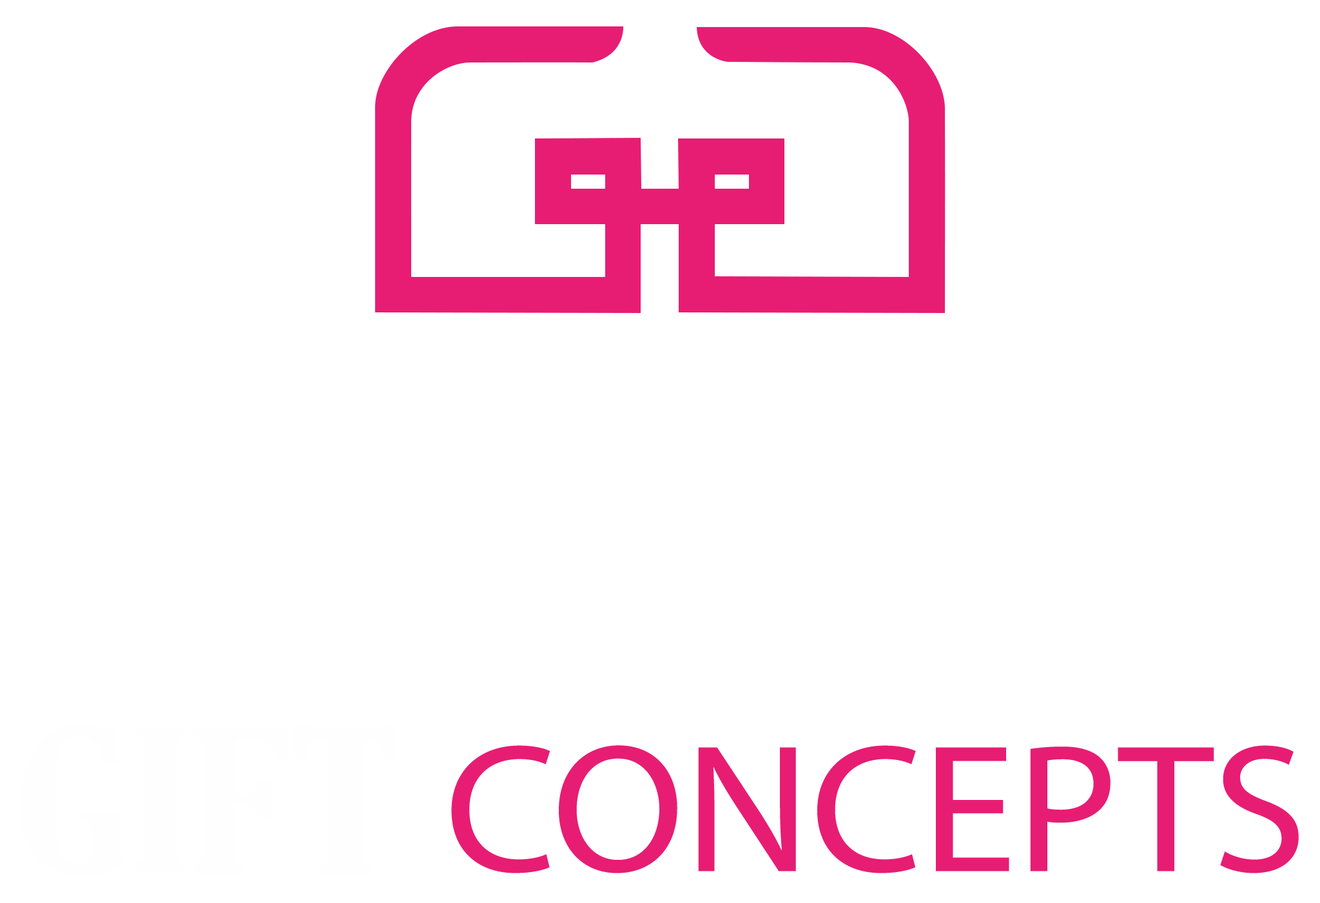
<style>
.page{position:relative;width:1320px;height:903px;background:#ffffff}
.page>*{position:absolute;margin:0}
.t1{font:183.2px "MyriadPro-Regular";color:#e71d73;scale:1.05 1}
</style>
<div class="page">
<p class="t1" style="left:451px;top:746px;width:848px;height:128px">CONCEPTS</p>
</div>
